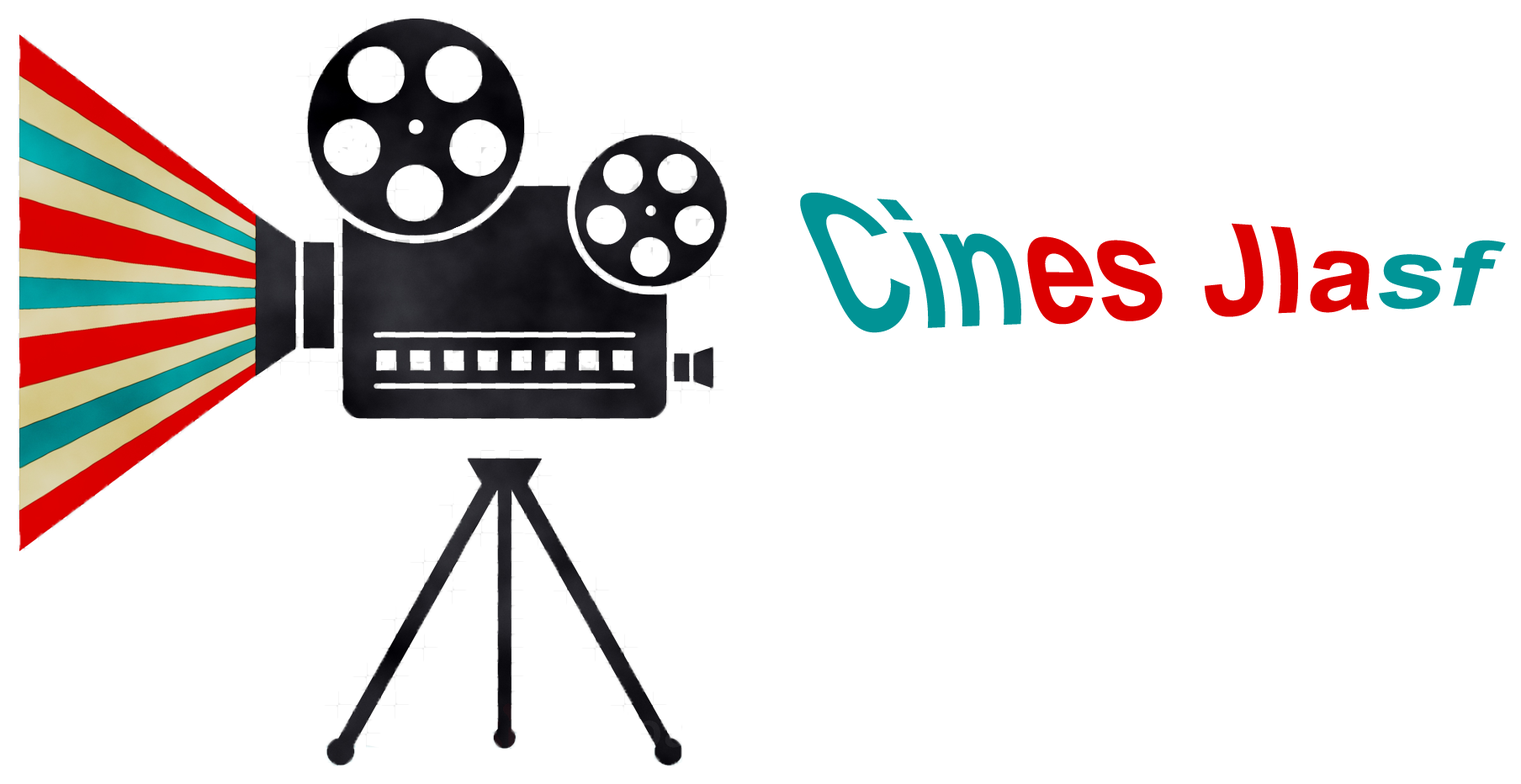
<style>
.page{position:relative;width:1521px;height:784px;background:#ffffff}
.page>*{position:absolute;margin:0}
.t1{font:135.4px "Arial-BoldMT";color:#dc0000}
.t2{font:135.4px "Arial-BoldMT";color:#019395}
.t3{font:135.4px "Arial-BoldMT";color:#019597}
</style>
<div class="page">
<p class="t1" style="left:800px;top:193px;width:706px;height:140px"><span class="t2">Cin</span>es Jla<span class="t3">sf</span></p>
</div>
